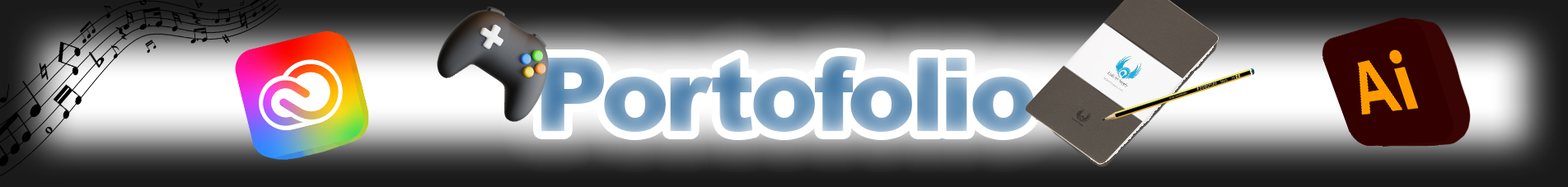
<style>
.page{position:relative;width:1568px;height:187px}
.page>*{position:absolute;margin:0}
.t1{font:103px "Arial-Black";letter-spacing:-0.05em}
</style>
<div class="page">
<p class="t1" style="left:541px;top:56px;width:493px;height:76px">Portofolio</p>
</div>
